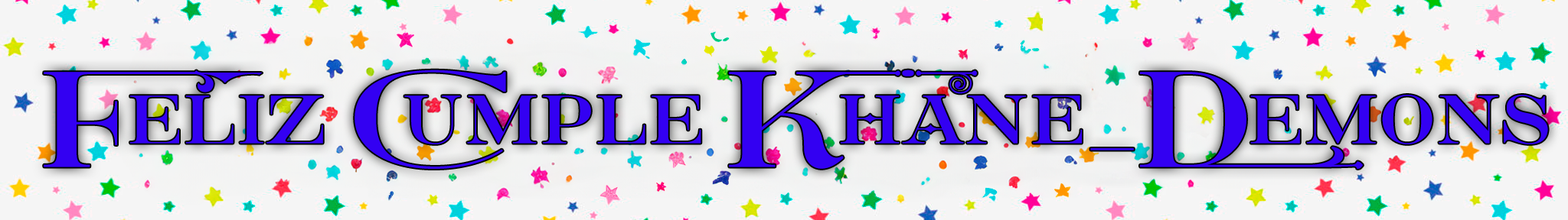
<style>
.page{position:relative;width:1568px;height:220px;background:#f5f5f5}
.page>*{position:absolute;margin:0}
.t1{font:118.7px "SaintCarellPERSONAL-Regular";color:#3300f2}
</style>
<div class="page">
<p class="t1" style="left:44px;top:70px;width:1504px;height:99px">Feliz Cumple Khane_Demons</p>
</div>
